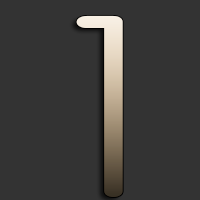
<style>
.page{position:relative;width:200px;height:200px;background:#333333}
.page>*{position:absolute;margin:0}
.t1{font:239.8px "GreyscaleBasic-Regular";scale:1.53 1}
</style>
<div class="page">
<p class="t1" style="left:76px;top:15px;width:47px;height:182px">1</p>
</div>
